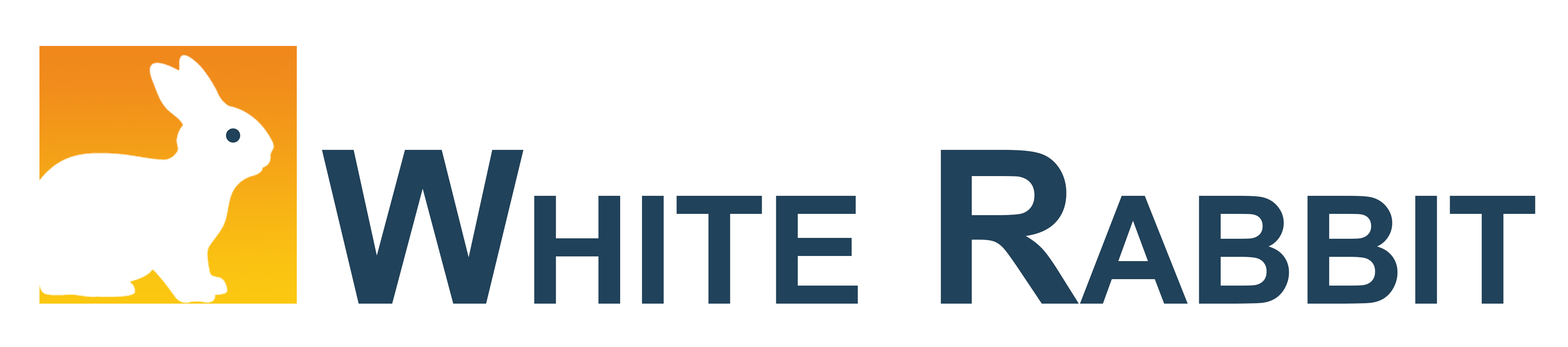
<style>
.page{position:relative;width:1568px;height:347px;background:#ffffff}
.page>*{position:absolute;margin:0}
.t1{font:214.4px "Arial-BoldMT";color:#20425a;font-variant:small-caps}
</style>
<div class="page">
<p class="t1" style="left:322px;top:149px;width:1213px;height:154px">White Rabbit</p>
</div>
